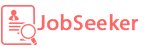
<style>
.page{position:relative;width:148px;height:50px;background:#ffffff}
.page>*{position:absolute;margin:0}
.t1{font:22px "MyriadPro-Regular";letter-spacing:0.01em;color:#ff6666;font-weight:bold}
</style>
<div class="page">
<p class="t1" style="left:37px;top:14px;width:102px;height:17px">JobSeeker</p>
</div>
